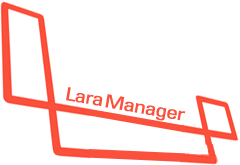
<style>
.page{position:relative;width:240px;height:165px;background:#ffffff}
.page>*{position:absolute;margin:0}
.t1{font:18px "UniversLTStd-Cn";letter-spacing:-0.06em;color:#fb503b;scale:1.37 1}
</style>
<div class="page">
<p class="t1" style="left:66px;top:87px;width:37px;height:19px;rotate:10deg">Lara</p>
<p class="t1" style="left:105px;top:94px;width:81px;height:27px;rotate:10deg">Manager</p>
</div>
